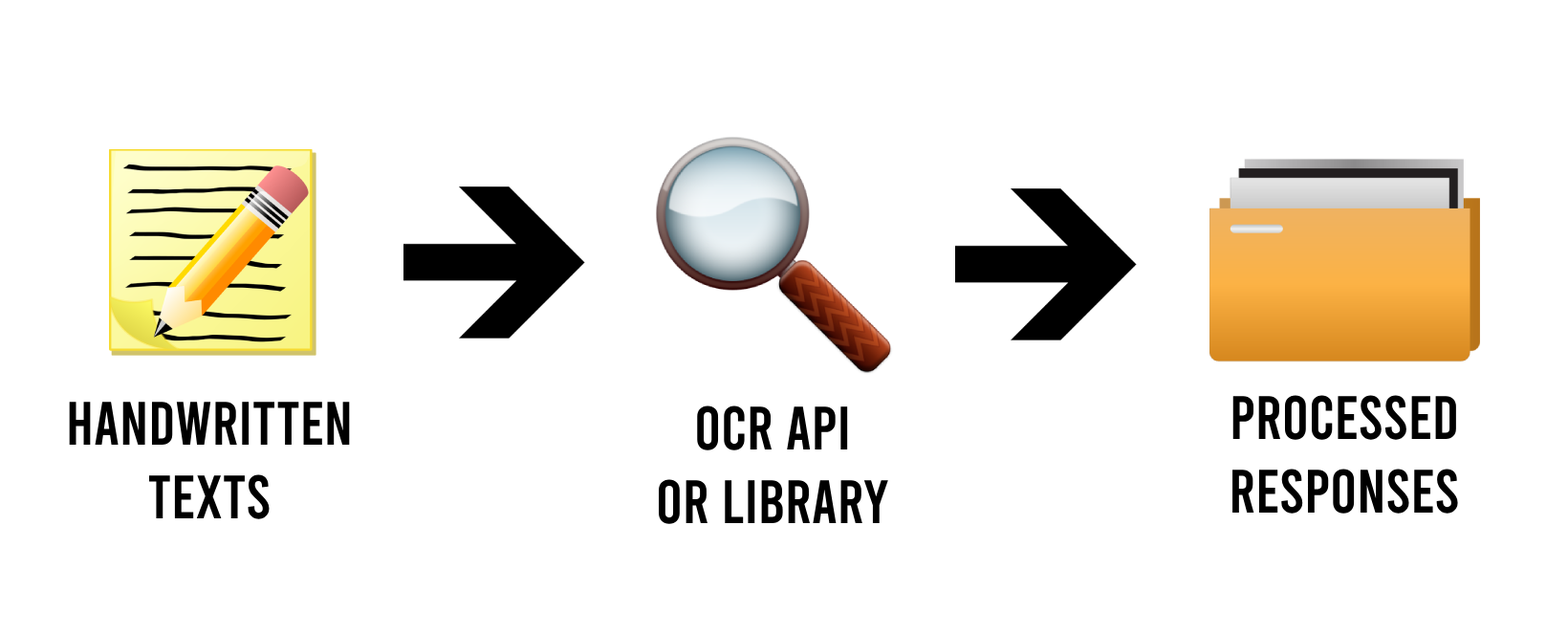
<style>
.page{position:relative;width:1568px;height:635px;background:#ffffff}
.page>*{position:absolute;margin:0}
.t1{font:61.2px "Bebas-Regular";color:#000000}
</style>
<div class="page">
<p class="t1" style="left:69px;top:402px;width:281px;height:117px;text-align:center">HANDWRITTEN<br>TEXTS</p>
<p class="t1" style="left:1232px;top:395px;width:226px;height:118px;text-align:center">PROCESSED<br>RESPONSES</p>
<p class="t1" style="left:659px;top:405px;width:229px;height:119px;text-align:center">OCR API<br>or LIBRARY</p>
</div>
